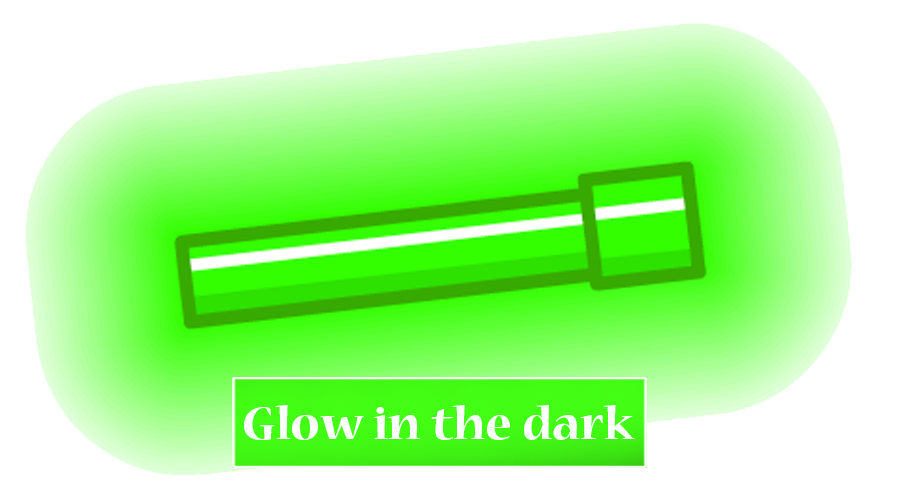
<style>
.page{position:relative;width:900px;height:500px;background:#ffffff}
.page>*{position:absolute;margin:0}
.t1{font:50.1px "NuevaStd-Bold";color:#ffffff;scale:1.06 1}
</style>
<div class="page">
<p class="t1" style="left:244px;top:405px;width:391px;height:35px">Glow in the dark</p>
</div>
